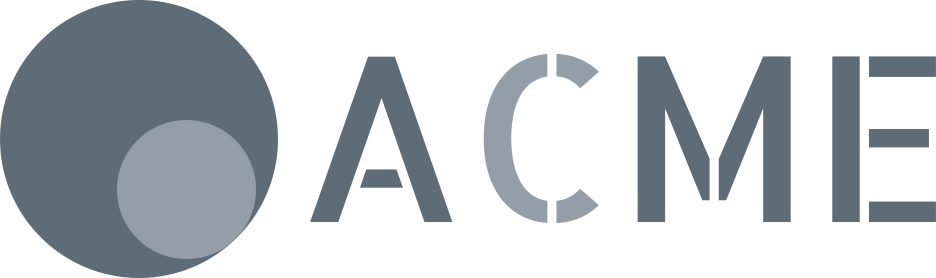
<style>
.page{position:relative;width:936px;height:278px;background:#ffffff}
.page>*{position:absolute;margin:0}
.t1{font:230px "AllertaStencil-Regular";color:#5e6c78}
.t2{font:230px "AllertaStencil-Regular";color:#939ea8}
</style>
<div class="page">
<p class="t1" style="left:310px;top:53px;width:626px;height:171px">A<span class="t2">C</span>ME</p>
</div>
